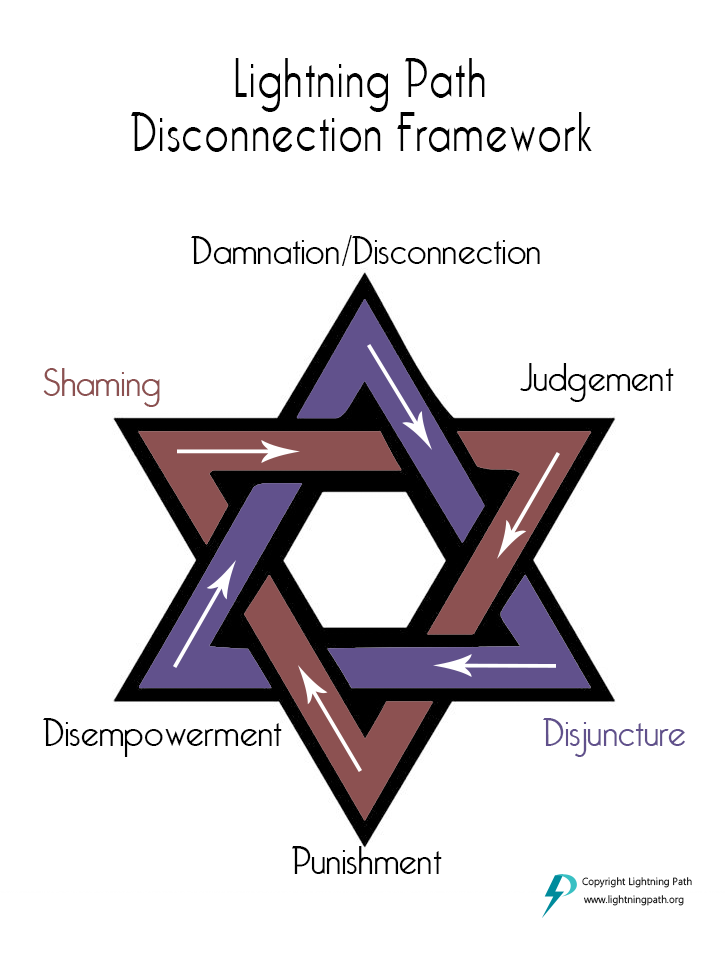
<style>
.page{position:relative;width:726px;height:969px;background:#ffffff}
.page>*{position:absolute;margin:0}
.t1{font:56.9px/53.7px "CaponeLight";letter-spacing:0.04em;color:#000000;scale:0.85 1}
.t2{font:41px "CaponeLight";color:#000000}
.t3{font:41px "CaponeLight";color:#8c5151}
.t4{font:41px "CaponeLight";color:#61518c}
.t5{font:10.2px "MyanmarText"}
.t6{font:10.2px "MyanmarText";color:#000000}
</style>
<div class="page">
<p class="t1" style="left:131px;top:58px;width:461px;height:94px;text-align:center">Lightning Path<br>Disconnection Framework</p>
<p class="t2" style="left:191px;top:235px;width:349px;height:31px">Damnation/Disconnection</p>
<p class="t2" style="left:520px;top:363px;width:154px;height:39px">Judgement</p>
<p class="t3" style="left:43px;top:368px;width:117px;height:39px">Shaming</p>
<p class="t2" style="left:43px;top:718px;width:239px;height:39px">Disempowerment</p>
<p class="t4" style="left:543px;top:718px;width:142px;height:39px">Disjuncture</p>
<p class="t2" style="left:292px;top:846px;width:150px;height:28px">Punishment</p>
<p class="t5" style="left:582px;top:877px;width:110px;height:11px">Copyright Lightning Path</p>
<p class="t6" style="left:584px;top:895px;width:100px;height:11px">www.lightningpath.org</p>
</div>
